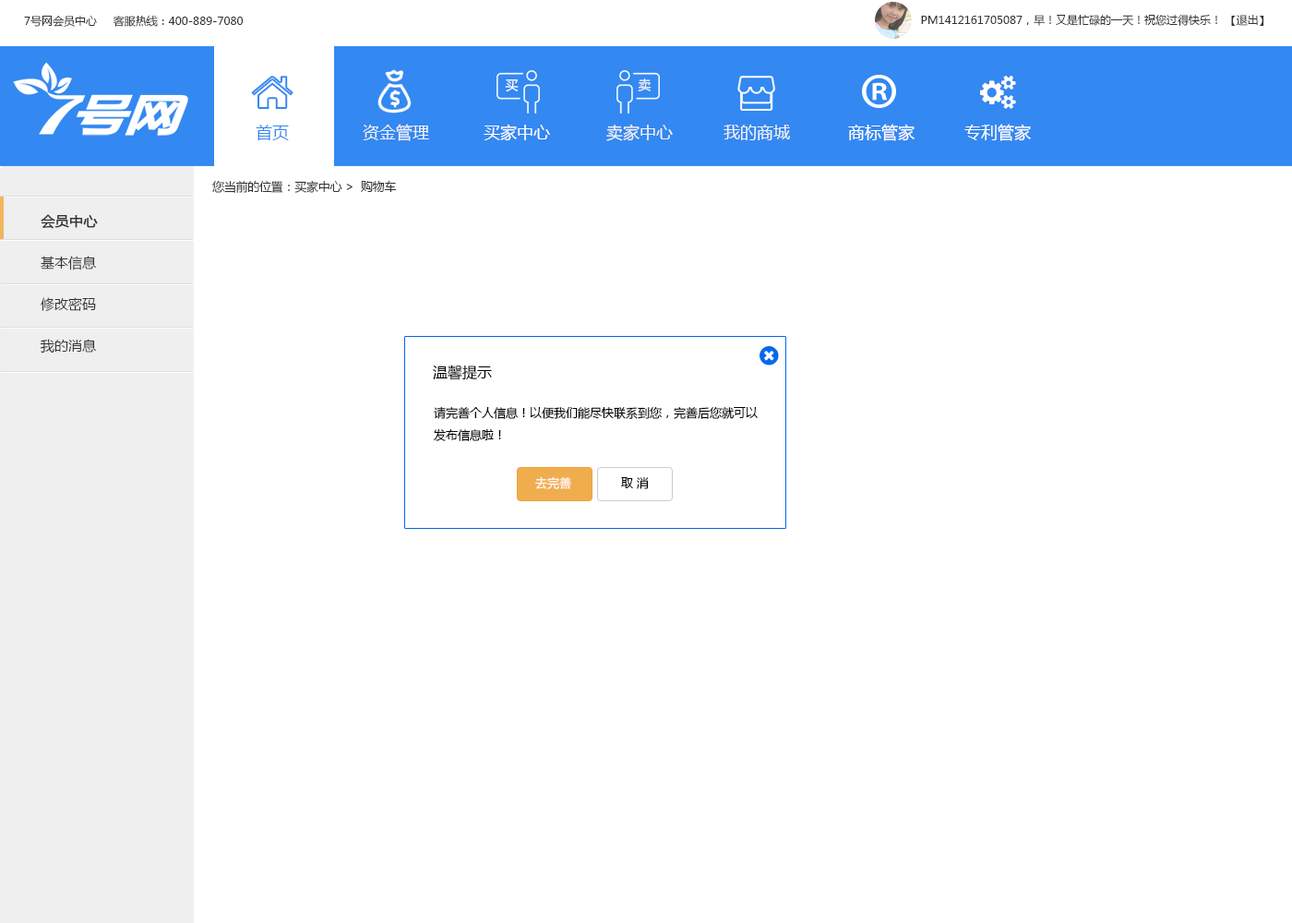
<style>
.page{position:relative;width:1292px;height:923px;background:#ffffff}
.page>*{position:absolute;margin:0}
.t1{font:11.1px "MicrosoftYaHei";color:#333333}
.t2{font:12.9px "MicrosoftYaHei";color:#ffffff}
.t3{font:12.9px "MicrosoftYaHei";color:#ecf0f1}
.t4{font:16.6px "MicrosoftYaHei";color:#3388f1}
.t5{font:16.6px "MicrosoftYaHei";color:#ecf0f1}
.t6{font:16.6px "MicrosoftYaHei";color:#ffffff}
.t7{font:12px "MicrosoftYaHei";letter-spacing:-0.02em;color:#333333}
.t8{font:13.8px/41.5px "MicrosoftYaHei";color:#333333}
.t9{font:13.8px/41.5px "MicrosoftYaHei";color:#333333;font-weight:bold}
.t10{font:14.8px "MicrosoftYaHei";color:#000000}
.t11{font:12px/22.1px "MicrosoftYaHei";color:#000000}
.t12{font:12px "MicrosoftYaHei";color:#ffffff}
.t13{font:12px "MicrosoftYaHei";color:#000000}
</style>
<div class="page">
<p class="t1" style="left:24px;top:15px;width:220px;height:12px">7号网会员中心     客服热线：400-889-7080</p>
<p class="t1" style="left:921px;top:15px;width:343px;height:11px">PM1412161705087，早！又是忙碌的一天！祝您过得快乐！ 【退出】</p>
<p class="t2" style="left:505px;top:79px;width:14px;height:13px">买</p>
<p class="t3" style="left:638px;top:78px;width:14px;height:13px">卖</p>
<p class="t4" style="left:256px;top:125px;width:33px;height:15px">首页</p>
<p class="t5" style="left:363px;top:124px;width:66px;height:17px">资金管理</p>
<p class="t6" style="left:484px;top:124px;width:66px;height:17px">买家中心</p>
<p class="t5" style="left:606px;top:124px;width:67px;height:17px">卖家中心</p>
<p class="t5" style="left:724px;top:125px;width:66px;height:15px">我的商城</p>
<p class="t6" style="left:848px;top:124px;width:67px;height:17px">商标管家</p>
<p class="t6" style="left:964px;top:124px;width:67px;height:17px">专利管家</p>
<p class="t7" style="left:212px;top:180px;width:185px;height:13px">您当前的位置：买家中心 &gt;  购物车</p>
<p class="t8" style="left:40px;top:214px;width:58px;height:139px"><span class="t9">会员中心<br></span>基本信息<br>修改密码<br>我的消息</p>
<p class="t10" style="left:433px;top:365px;width:59px;height:15px">温馨提示</p>
<p class="t11" style="left:434px;top:406px;width:324px;height:35px">请完善个人信息！以便我们能尽快联系到您，完善后您就可以发布信息啦！</p>
<p class="t12" style="left:535px;top:476px;width:36px;height:13px">去完善</p>
<p class="t13" style="left:621px;top:476px;width:28px;height:13px">取 消</p>
</div>
